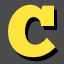
<style>
.page{position:relative;width:64px;height:64px;background:#4b4b4b}
.page>*{position:absolute;margin:0}
.t1{font:72px "ChunkFive-Roman";letter-spacing:-0.01em;color:#fee540}
</style>
<div class="page">
<p class="t1" style="left:8px;top:4px;width:48px;height:54px">C</p>
</div>
